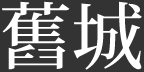
<style>
.page{position:relative;width:144px;height:72px;background:#333333}
.page>*{position:absolute;margin:0}
.t1{font:72px "KozMinPro-Medium";color:#ffffff}
</style>
<div class="page">
<p class="t1" style="left:2px;top:1px;width:140px;height:69px">舊城</p>
</div>
